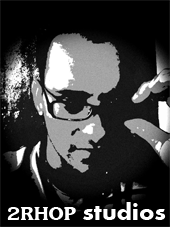
<style>
.page{position:relative;width:170px;height:227px;background:#000000}
.page>*{position:absolute;margin:0}
.t1{font:29.5px "JasmineUPCBold";color:#ffffff}
.t2{font:25px "Aharoni-Bold";color:#ffffff}
</style>
<div class="page">
<p class="t1" style="left:7px;top:207px;width:69px;height:13px">2RHOP</p>
<p class="t2" style="left:83px;top:202px;width:83px;height:18px">studios</p>
</div>
